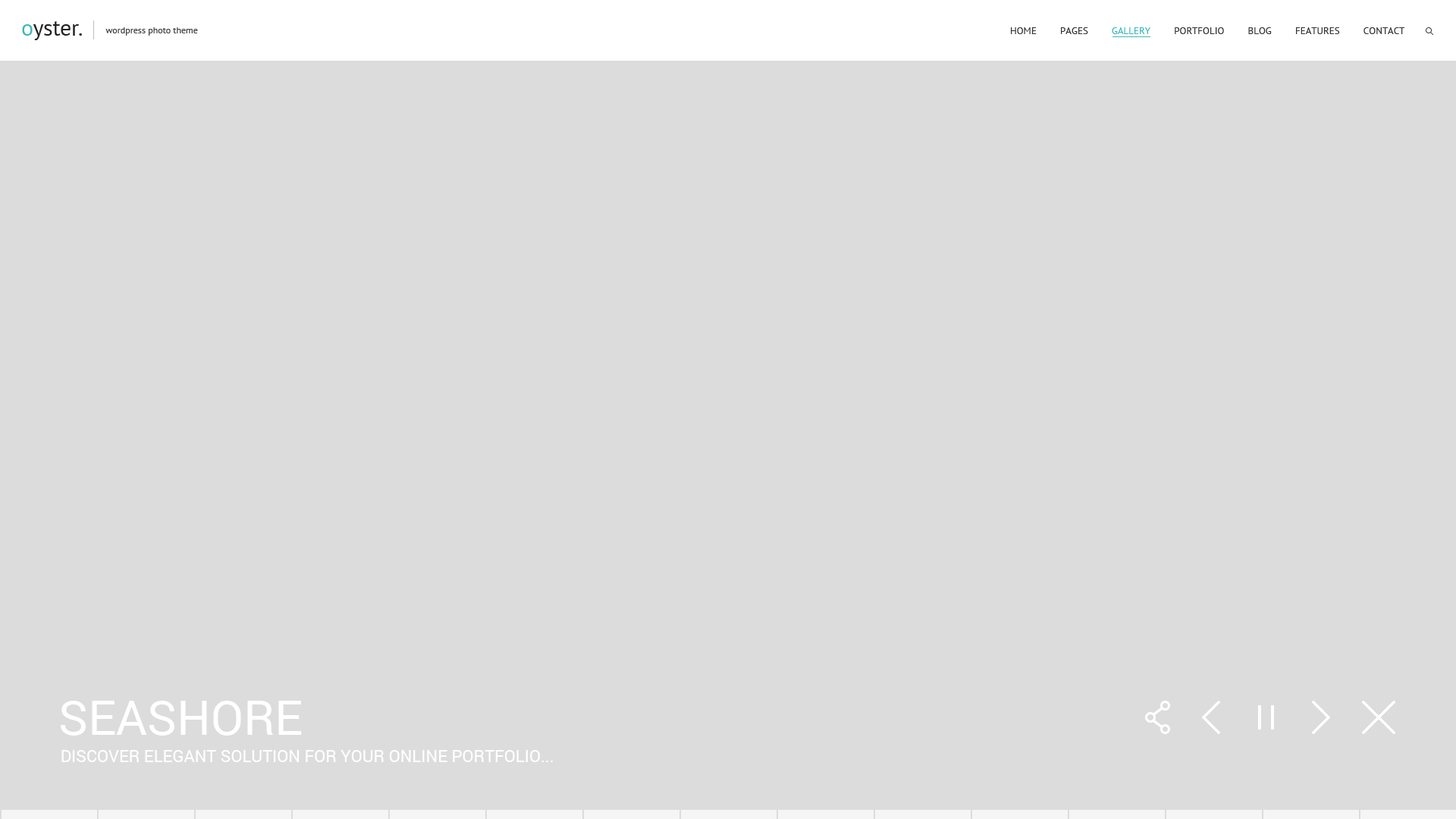
<style>
.page{position:relative;width:1456px;height:819px;background:#dcdcdc}
.page>*{position:absolute;margin:0}
.t1{font:9.1px "PTSans-Regular";color:#434343}
.t2{font:9.9px "PTSans-Regular";color:#343434;text-transform:uppercase}
.t3{font:9.9px "PTSans-Regular";color:#40b7b8;text-transform:uppercase}
.t4{font:47.8px "Roboto-Regular";color:#ffffff;text-transform:uppercase}
.t5{font:16.7px "Roboto-Regular";color:#ffffff;text-transform:uppercase}
</style>
<div class="page">
<p class="t1" style="left:105px;top:27px;width:93px;height:9px">wordpress photo theme</p>
<p class="t2" style="left:1011px;top:27px;width:394px;height:7px">Home         Pages         <span class="t3">Gallery         </span>Portfolio         Blog         Features         Contact</p>
<p class="t4" style="left:61px;top:701px;width:241px;height:35px">seashore</p>
<p class="t5" style="left:61px;top:750px;width:492px;height:12px">Discover elegant solution for your online portfolio...</p>
</div>
